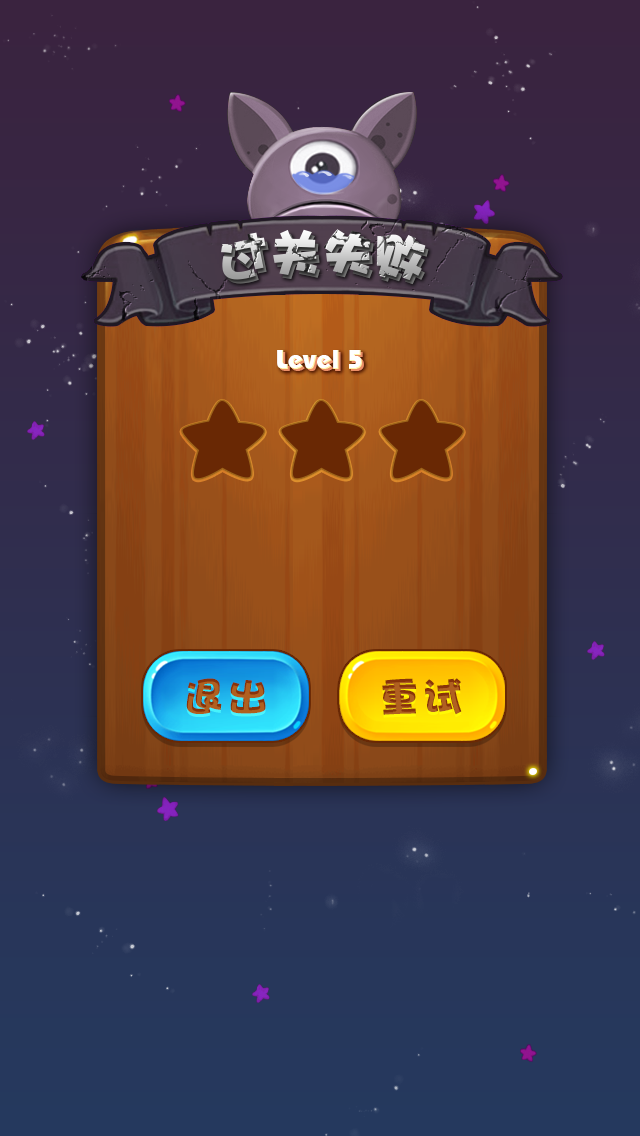
<style>
.page{position:relative;width:640px;height:1136px}
.page>*{position:absolute;margin:0}
.t1{font:50px "DFPHaiBaoW12"}
.t2{font:27.2px "310-CAI978";color:#ffffff}
.t3{font:27.2px "310-CAI978"}
.t4{font:40px "DFPHaiBaoW12";letter-spacing:0.1em;color:#b06020}
.t5{font:40px "DFPHaiBaoW12";letter-spacing:0.1em}
</style>
<div class="page">
<p class="t1" style="left:224px;top:233px;width:205px;height:52px">过关失败</p>
<p class="t2" style="left:277px;top:350px;width:85px;height:19px">Level 5</p>
<p class="t3" style="left:279px;top:352px;width:85px;height:19px">Level 5</p>
<p class="t4" style="left:186px;top:678px;width:80px;height:36px">退出</p>
<p class="t5" style="left:382px;top:678px;width:80px;height:37px">重试</p>
</div>
